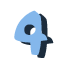
<style>
.page{position:relative;width:64px;height:64px;background:#ffffff}
.page>*{position:absolute;margin:0}
.t1{font:66px "Samba"}
</style>
<div class="page">
<p class="t1" style="left:20px;top:13px;width:34px;height:45px">4</p>
</div>
